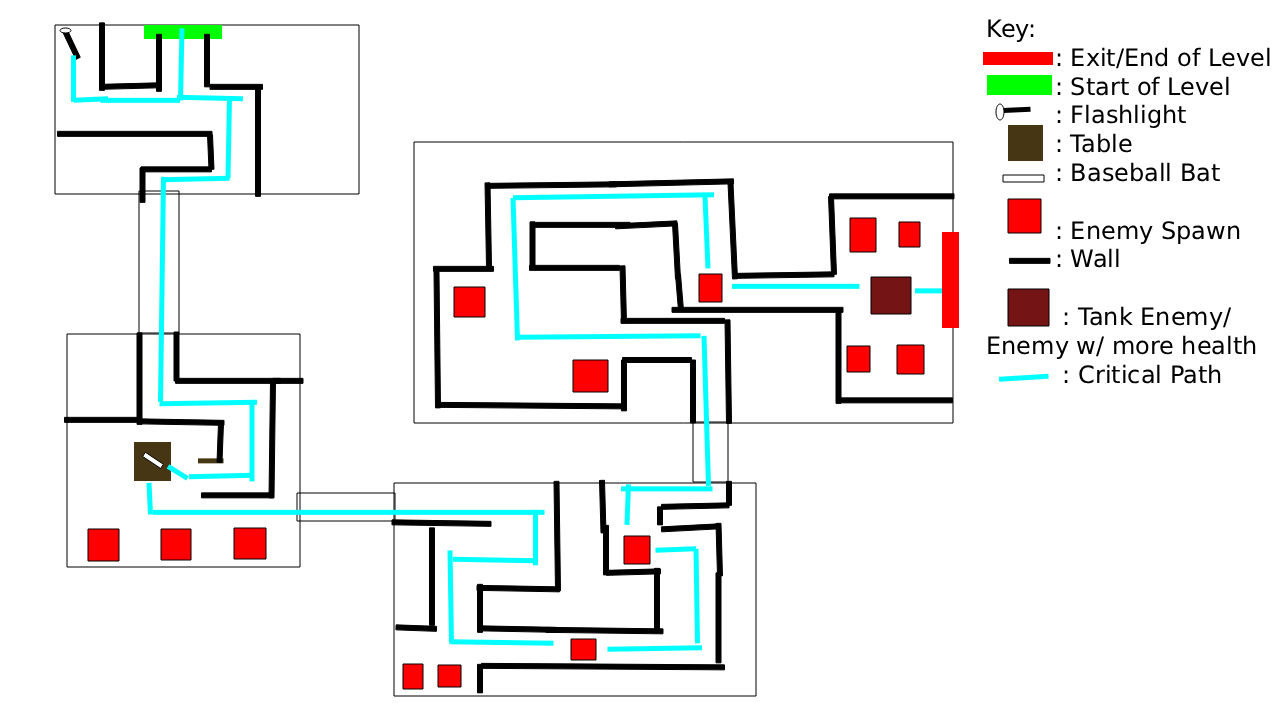
<style>
.page{position:relative;width:1280px;height:720px;background:#ffffff}
.page>*{position:absolute;margin:0}
.t1{font:24px "DejaVuSans";color:#000000}
</style>
<div class="page">
<p class="t1" style="left:988px;top:19px;width:282px;height:365px">Key:<br>         : Exit/End of Level<br>         : Start of Level<br>         : Flashlight<br>         : Table<br>         : Baseball Bat<br><br>         : Enemy Spawn<br>         : Wall<br><br>          : Tank Enemy/<br>Enemy w/ more health<br>          : Critical Path</p>
</div>
